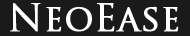
<style>
.page{position:relative;width:190px;height:36px;background:#1a1a1a}
.page>*{position:absolute;margin:0}
.t1{font:36px "TrajanPro-Regular";color:#ffffff;font-weight:bold}
</style>
<div class="page">
<p class="t1" style="left:10px;top:3px;width:169px;height:29px">NeoEase</p>
</div>
